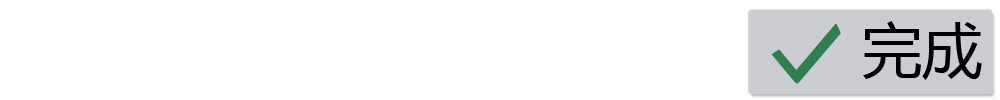
<style>
.page{position:relative;width:1000px;height:100px;background:#ffffff}
.page>*{position:absolute;margin:0}
.t1{font:60px "MicrosoftYaHei";color:#000000}
</style>
<div class="page">
<p class="t1" style="left:863px;top:21px;width:119px;height:59px">完成</p>
</div>
